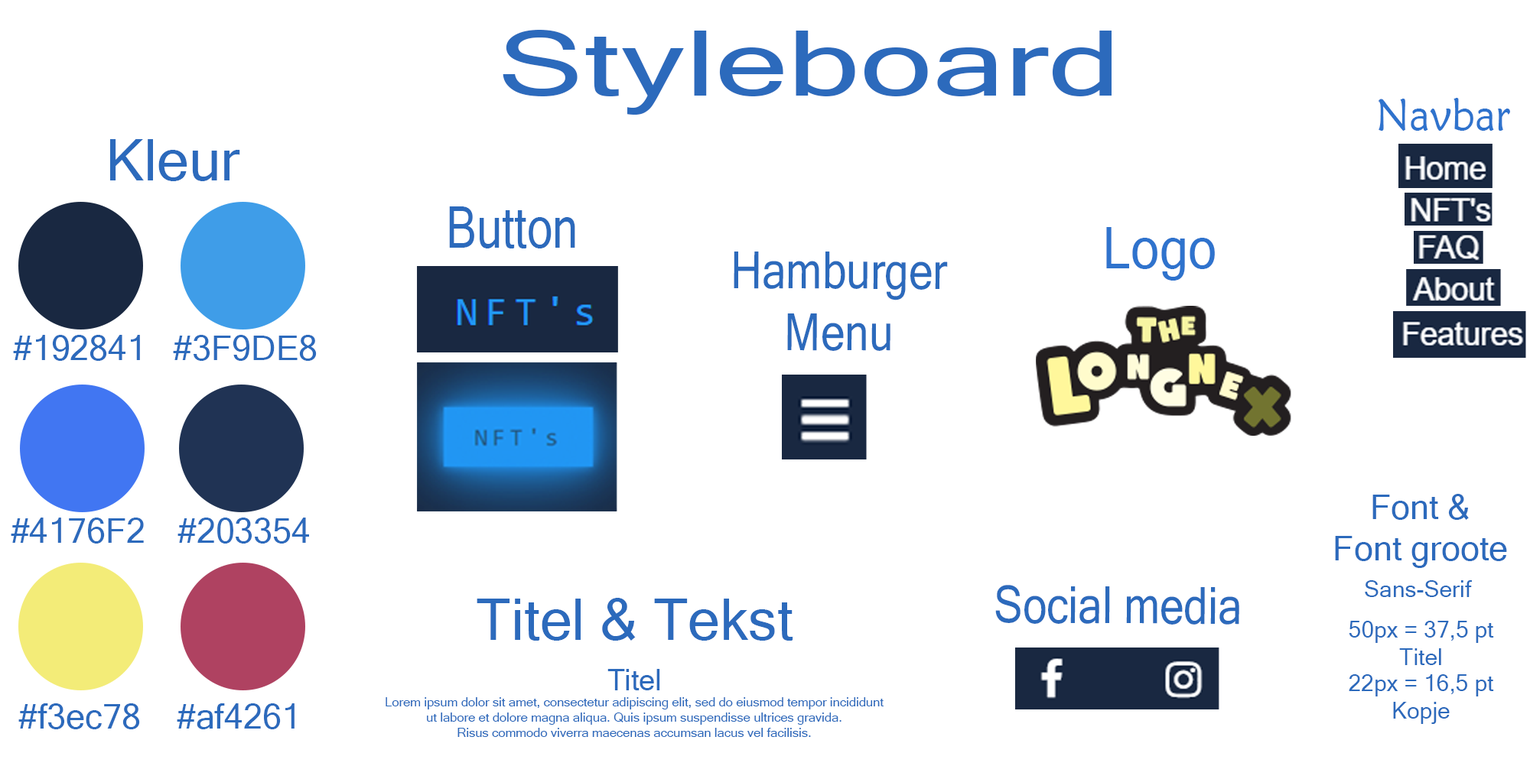
<style>
.page{position:relative;width:1530px;height:779px;background:#ffffff}
.page>*{position:absolute;margin:0}
.t1{font:91.4px "MicrosoftSansSerif";color:#2c6abc;scale:1.43 1}
.t2{font:45.7px "MaiandraGD-Regular";color:#2f73cd;scale:0.9 1}
.t3{font:57.1px "MicrosoftSansSerif";color:#2c6abc}
.t4{font:57.1px "MicrosoftSansSerif";color:#2c6abc;scale:0.8 1}
.t5{font:57.1px "MicrosoftSansSerif";color:#2f73cd;scale:0.9 1}
.t6{font:51.4px "MicrosoftSansSerif";color:#2c6abc;scale:0.84 1}
.t7{font:34.3px "MicrosoftSansSerif";color:#2c6abc}
.t8{font:22.9px "MicrosoftSansSerif";color:#2c6abc}
.t9{font:28.7px "MicrosoftSansSerif";color:#2c6abc}
.t10{font:12.6px "MicrosoftSansSerif";color:#2c6abc}
</style>
<div class="page">
<p class="t1" style="left:503px;top:30px;width:608px;height:85px">Styleboard</p>
<p class="t2" style="left:1378px;top:98px;width:132px;height:34px">Navbar</p>
<p class="t3" style="left:110px;top:139px;width:130px;height:42px">Kleur</p>
<p class="t4" style="left:449px;top:207px;width:126px;height:42px">Button</p>
<p class="t5" style="left:1106px;top:227px;width:109px;height:54px">Logo</p>
<p class="t6" style="left:734px;top:252px;width:214px;height:99px;text-align:center">Hamburger<br>Menu</p>
<p class="t7" style="left:13px;top:335px;width:127px;height:26px">#192841</p>
<p class="t7" style="left:173px;top:335px;width:144px;height:26px">#3F9DE8</p>
<p class="t7" style="left:1335px;top:494px;width:172px;height:74px;text-align:center">Font &amp; <br>Font groote</p>
<p class="t7" style="left:11px;top:518px;width:133px;height:26px">#4176F2</p>
<p class="t7" style="left:177px;top:518px;width:132px;height:26px">#203354</p>
<p class="t8" style="left:1365px;top:581px;width:107px;height:16px">Sans-Serif</p>
<p class="t6" style="left:995px;top:585px;width:244px;height:40px">Social media</p>
<p class="t3" style="left:477px;top:598px;width:316px;height:43px">Titel &amp; Tekst</p>
<p class="t8" style="left:1349px;top:621px;width:145px;height:44px;text-align:center">50px = 37,5 pt<br>Titel</p>
<p class="t9" style="left:607px;top:669px;width:53px;height:22px">Titel</p>
<p class="t8" style="left:1349px;top:675px;width:145px;height:49px;text-align:center">22px = 16,5 pt<br>Kopje</p>
<p class="t10" style="left:386px;top:698px;width:497px;height:39px;text-align:center">Lorem ipsum dolor sit amet, consectetur adipiscing elit, sed do eiusmod tempor incididunt <br>ut labore et dolore magna aliqua. Quis ipsum suspendisse ultrices gravida. <br>Risus commodo viverra maecenas accumsan lacus vel facilisis.</p>
<p class="t7" style="left:18px;top:704px;width:122px;height:26px">#f3ec78</p>
<p class="t7" style="left:177px;top:704px;width:117px;height:26px">#af4261</p>
</div>
